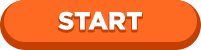
<style>
.page{position:relative;width:201px;height:50px;background:#ff6a22}
.page>*{position:absolute;margin:0}
.t1{font:25px "GothamPro-Black";color:#ffffff}
</style>
<div class="page">
<p class="t1" style="left:58px;top:11px;width:84px;height:19px">START</p>
</div>
